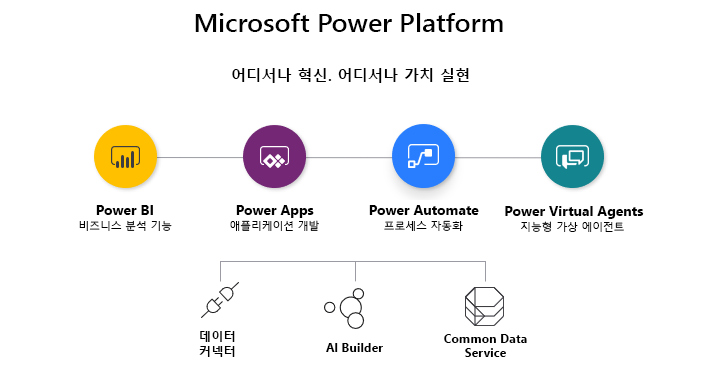
<style>
.page{position:relative;width:708px;height:379px;background:#ffffff}
.page>*{position:absolute;margin:0}
.t1{font:25.5px "SegoeUI-Semibold";color:#000000;scale:1.05 1}
.t2{font:15.3px "MalgunGothicBold";color:#000000}
.t3{font:14px "SegoeUI-Bold";color:#000000}
.t4{font:10.7px "MalgunGothic";color:#000000}
.t5{font:12.4px/14.7px "MalgunGothicBold";color:#000000}
.t6{font:12.4px/14.7px "SegoeUI-Bold";color:#000000}
.t7{font:12.4px "SegoeUI-Bold";color:#000000}
</style>
<div class="page">
<p class="t1" style="left:195px;top:13px;width:308px;height:19px">Microsoft Power Platform</p>
<p class="t2" style="left:232px;top:68px;width:237px;height:15px">어디서나 혁신. 어디서나 가치 실현</p>
<p class="t3" style="left:96px;top:205px;width:57px;height:10px">Power BI</p>
<p class="t3" style="left:236px;top:205px;width:78px;height:13px">Power Apps</p>
<p class="t3" style="left:369px;top:205px;width:110px;height:10px">Power Automate</p>
<p class="t3" style="left:505px;top:206px;width:139px;height:13px">Power Virtual Agents</p>
<p class="t4" style="left:79px;top:220px;width:93px;height:11px">비즈니스 분석 기능</p>
<p class="t4" style="left:230px;top:220px;width:89px;height:11px">애플리케이션 개발</p>
<p class="t4" style="left:384px;top:220px;width:79px;height:11px">프로세스 자동화</p>
<p class="t4" style="left:521px;top:221px;width:103px;height:11px">지능형 가상 에이전트</p>
<p class="t5" style="left:199px;top:331px;width:36px;height:26px;text-align:center">데이터 <br>커넥터</p>
<p class="t6" style="left:444px;top:334px;width:83px;height:23px;text-align:center">Common Data Service</p>
<p class="t7" style="left:326px;top:343px;width:57px;height:9px">Al Builder</p>
</div>
